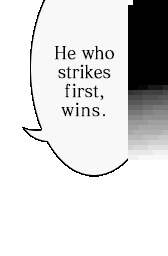
<style>
.page{position:relative;width:168px;height:256px;background:#ffffff}
.page>*{position:absolute;margin:0}
.t1{font:17.6px/19px "MatissePro-M";letter-spacing:-0.01em;color:#000000;font-weight:bold;scale:0.91 1}
.t2{font:17.6px/19px "MatissePro-M";color:#000000;font-weight:bold;scale:0.91 1}
.t3{font:17.6px/19px "MatissePro-M";letter-spacing:0.05em;color:#000000;font-weight:bold;scale:0.91 1}
.t4{font:17.6px/19px "MatissePro-M";letter-spacing:-0.05em;color:#000000;font-weight:bold;scale:0.91 1}
</style>
<div class="page">
<p class="t1" style="left:54px;top:45px;width:60px;height:72px;text-align:center">He who<br>strikes<br><span class="t2">ｆirst</span><span class="t3">,<br>wins</span><span class="t4">.</span></p>
</div>
